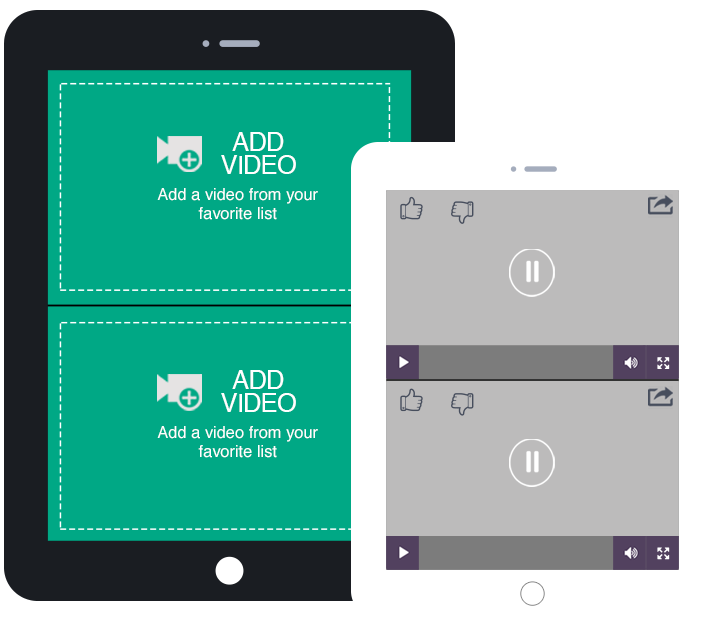
<style>
.page{position:relative;width:723px;height:627px;background:#00a885}
.page>*{position:absolute;margin:0}
.t1{font:25.6px "Helvetica";letter-spacing:-0.04em;color:#ffffff;text-transform:uppercase}
.t2{font:16.4px "Helvetica";color:#ffffff}
</style>
<div class="page">
<p class="t1" style="left:221px;top:132px;width:75px;height:42px">ADD VIDEO</p>
<p class="t2" style="left:157px;top:188px;width:161px;height:32px;text-align:center">Add a video from your favorite list</p>
<p class="t1" style="left:221px;top:370px;width:75px;height:42px">ADD VIDEO</p>
<p class="t2" style="left:157px;top:426px;width:161px;height:32px;text-align:center">Add a video from your favorite list</p>
</div>
